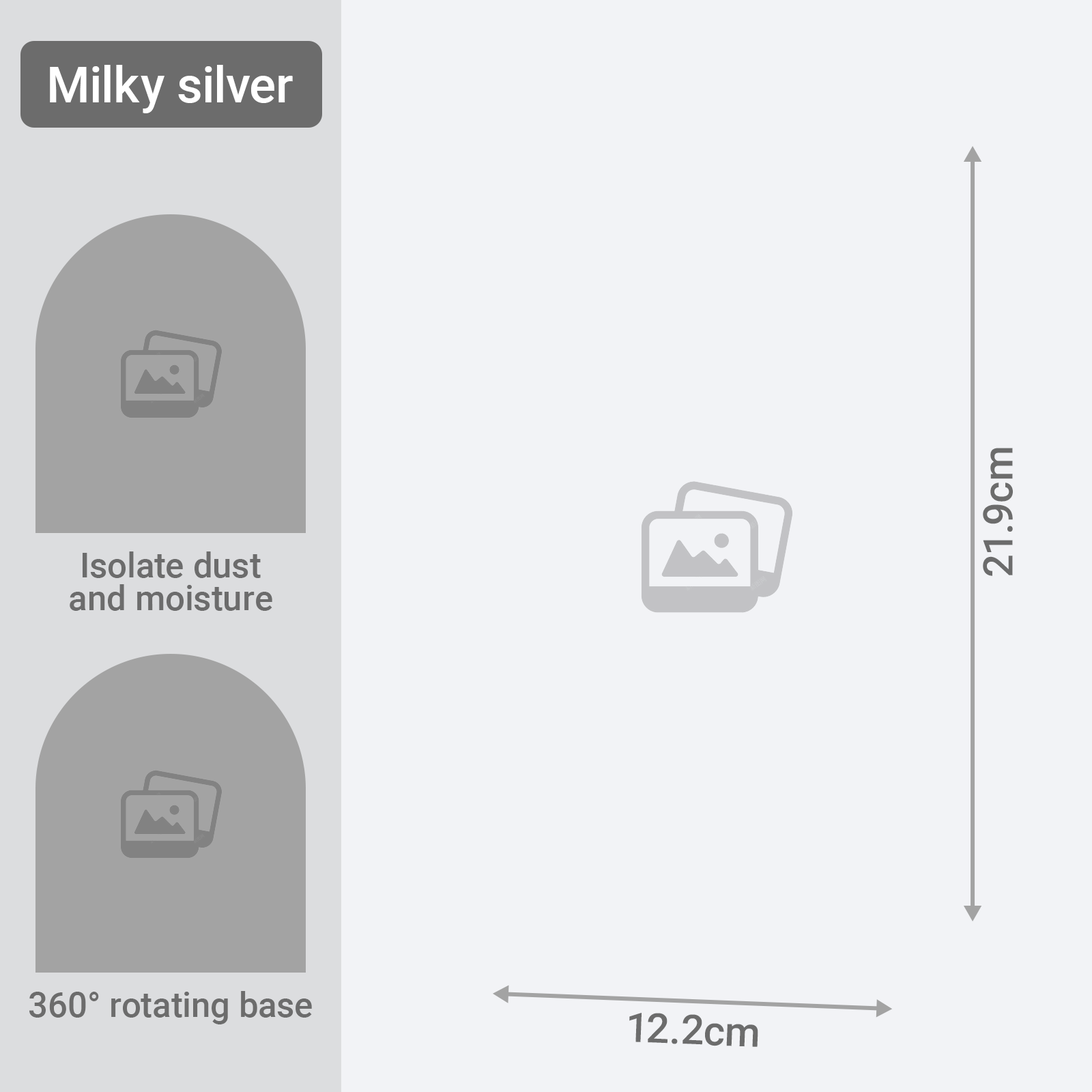
<style>
.page{position:relative;width:1092px;height:1092px;background:#f2f3f6}
.page>*{position:absolute;margin:0}
.t1{font:49.5px "Roboto-Medium";color:#ffffff}
.t2{font:40.9px "Roboto-Medium";color:#6c6c6c}
.t3{font:34.9px/32.8px "Roboto-Medium";color:#6c6c6c}
.t4{font:34.9px "Roboto-Medium";color:#6c6c6c}
</style>
<div class="page">
<p class="t1" style="left:50px;top:65px;width:243px;height:48px">Milky silver</p>
<p class="t2" style="left:983px;top:448px;width:30px;height:128px;rotate:-90deg">21.9cm</p>
<p class="t3" style="left:70px;top:551px;width:202px;height:60px;text-align:center">Isolate dust<br>and moisture</p>
<p class="t4" style="left:29px;top:991px;width:283px;height:33px">360° rotating base</p>
<p class="t2" style="left:629px;top:1013px;width:129px;height:34px;rotate:2deg">12.2cm</p>
</div>
